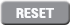
<style>
.page{position:relative;width:70px;height:25px;background:#919296}
.page>*{position:absolute;margin:0}
.t1{font:11px "HeadlineR-HM";letter-spacing:-0.02em;color:#f9fafc}
</style>
<div class="page">
<p class="t1" style="left:16px;top:8px;width:38px;height:10px">RESET</p>
</div>
